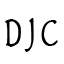
<style>
.page{position:relative;width:64px;height:64px;background:#ffffff}
.page>*{position:absolute;margin:0}
.t1{font:44.7px "Herculanum";color:#000000;scale:0.81 1}
</style>
<div class="page">
<p class="t1" style="left:5px;top:18px;width:53px;height:34px">dJC</p>
</div>
